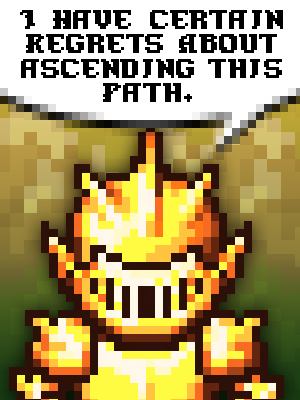
<style>
.page{position:relative;width:300px;height:400px;background:#ffffff}
.page>*{position:absolute;margin:0}
.t1{font:22px/24.4px "GoldBoxGames";color:#000000;scale:0.91 1}
</style>
<div class="page">
<p class="t1" style="left:20px;top:10px;width:263px;height:92px;text-align:center">I Have certain<br>Regrets About<br>ascending this<br>Path.</p>
</div>
